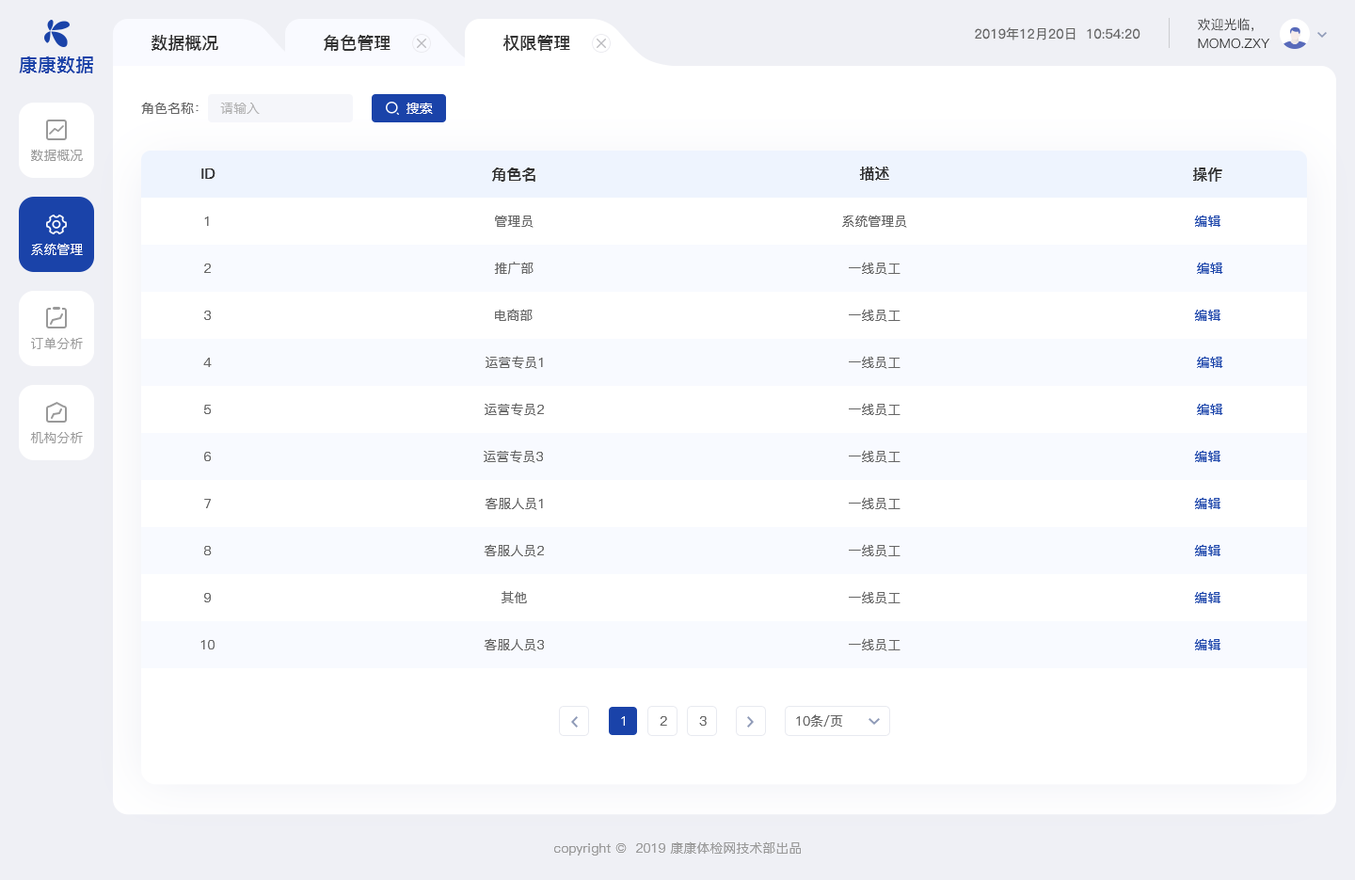
<style>
.page{position:relative;width:1355px;height:880px;background:#ffffff}
.page>*{position:absolute;margin:0}
.t1{font:13.2px "PingFang-SC-Medium";color:#333333;text-transform:uppercase}
.t2{font:13.2px "PingFang-SC-Regular";color:#666666}
.t3{font:16.9px "PingFang-SC-Bold";color:#333333;text-transform:uppercase}
.t4{font:18.8px "PingFangSC-Medium";color:#1a43a9;text-transform:uppercase}
.t5{font:13.2px "PingFang-SC-Medium";color:#666666}
.t6{font:13.2px "PingFang-SC-Medium";color:#b3b3b3}
.t7{font:13.2px "MicrosoftYaHei";letter-spacing:0.02em;color:#ffffff}
.t8{font:13.2px "PingFang-SC-Medium";color:#999999;text-transform:uppercase}
.t9{font:15.1px "PingFang-SC-Bold";color:#333333;text-transform:uppercase}
.t10{font:13.2px "PingFang-SC-Medium";color:#666666;text-transform:uppercase}
.t11{font:13.2px "PingFang-SC-Medium";color:#1a43a9;text-transform:uppercase}
.t12{font:13.2px "PingFang-SC-Medium";color:#ffffff;text-transform:uppercase}
.t13{font:13.2px "PingFang-SC-Medium";color:#999999}
</style>
<div class="page">
<p class="t1" style="left:1198px;top:18px;width:56px;height:14px">欢迎光临，</p>
<p class="t2" style="left:975px;top:27px;width:166px;height:13px">2019年12月20日  10:54:20</p>
<p class="t3" style="left:152px;top:35px;width:66px;height:16px">数据概况</p>
<p class="t3" style="left:324px;top:35px;width:67px;height:16px">角色管理</p>
<p class="t3" style="left:503px;top:35px;width:67px;height:16px">权限管理</p>
<p class="t1" style="left:1198px;top:38px;width:72px;height:11px">momo.zxy</p>
<p class="t4" style="left:19px;top:56px;width:74px;height:17px">康康数据</p>
<p class="t5" style="left:141px;top:102px;width:58px;height:12px">角色名称：</p>
<p class="t6" style="left:220px;top:103px;width:40px;height:11px">请输入</p>
<p class="t7" style="left:407px;top:103px;width:26px;height:11px">搜索</p>
<p class="t8" style="left:31px;top:150px;width:52px;height:11px">数据概况</p>
<p class="t9" style="left:201px;top:168px;width:15px;height:11px">ID</p>
<p class="t9" style="left:492px;top:168px;width:43px;height:14px">角色名</p>
<p class="t9" style="left:859px;top:167px;width:30px;height:14px">描述</p>
<p class="t9" style="left:1193px;top:168px;width:29px;height:14px">操作</p>
<p class="t10" style="left:204px;top:216px;width:5px;height:10px">1</p>
<p class="t10" style="left:495px;top:215px;width:39px;height:13px">管理员</p>
<p class="t10" style="left:842px;top:215px;width:65px;height:13px">系统管理员</p>
<p class="t11" style="left:1194px;top:215px;width:27px;height:12px">编辑</p>
<p class="t12" style="left:31px;top:243px;width:52px;height:12px">系统管理</p>
<p class="t10" style="left:204px;top:264px;width:7px;height:9px">2</p>
<p class="t10" style="left:494px;top:262px;width:40px;height:13px">推广部</p>
<p class="t10" style="left:849px;top:262px;width:52px;height:13px">一线员工</p>
<p class="t11" style="left:1197px;top:262px;width:26px;height:12px">编辑</p>
<p class="t10" style="left:204px;top:311px;width:7px;height:9px">3</p>
<p class="t10" style="left:495px;top:309px;width:38px;height:12px">电商部</p>
<p class="t10" style="left:849px;top:309px;width:52px;height:13px">一线员工</p>
<p class="t11" style="left:1194px;top:309px;width:27px;height:12px">编辑</p>
<p class="t8" style="left:31px;top:337px;width:52px;height:12px">订单分析</p>
<p class="t10" style="left:203px;top:358px;width:9px;height:9px">4</p>
<p class="t10" style="left:486px;top:356px;width:57px;height:13px">运营专员1</p>
<p class="t10" style="left:849px;top:356px;width:52px;height:13px">一线员工</p>
<p class="t11" style="left:1197px;top:356px;width:26px;height:12px">编辑</p>
<p class="t10" style="left:204px;top:405px;width:7px;height:9px">5</p>
<p class="t10" style="left:485px;top:403px;width:59px;height:13px">运营专员2</p>
<p class="t10" style="left:849px;top:403px;width:52px;height:13px">一线员工</p>
<p class="t11" style="left:1197px;top:403px;width:26px;height:12px">编辑</p>
<p class="t8" style="left:30px;top:432px;width:53px;height:11px">机构分析</p>
<p class="t10" style="left:484px;top:450px;width:59px;height:13px">运营专员3</p>
<p class="t10" style="left:849px;top:450px;width:52px;height:13px">一线员工</p>
<p class="t11" style="left:1194px;top:450px;width:27px;height:12px">编辑</p>
<p class="t10" style="left:204px;top:452px;width:7px;height:9px">6</p>
<p class="t10" style="left:485px;top:497px;width:58px;height:13px">客服人员1</p>
<p class="t10" style="left:849px;top:497px;width:52px;height:13px">一线员工</p>
<p class="t11" style="left:1194px;top:497px;width:27px;height:12px">编辑</p>
<p class="t10" style="left:204px;top:499px;width:7px;height:9px">7</p>
<p class="t10" style="left:204px;top:546px;width:8px;height:9px">8</p>
<p class="t10" style="left:484px;top:544px;width:60px;height:13px">客服人员2</p>
<p class="t10" style="left:849px;top:544px;width:52px;height:13px">一线员工</p>
<p class="t11" style="left:1194px;top:544px;width:27px;height:12px">编辑</p>
<p class="t10" style="left:204px;top:593px;width:7px;height:9px">9</p>
<p class="t10" style="left:502px;top:591px;width:25px;height:12px">其他</p>
<p class="t10" style="left:849px;top:591px;width:52px;height:13px">一线员工</p>
<p class="t11" style="left:1194px;top:591px;width:27px;height:12px">编辑</p>
<p class="t10" style="left:200px;top:640px;width:15px;height:9px">10</p>
<p class="t10" style="left:484px;top:638px;width:60px;height:13px">客服人员3</p>
<p class="t10" style="left:849px;top:638px;width:52px;height:13px">一线员工</p>
<p class="t11" style="left:1194px;top:638px;width:27px;height:12px">编辑</p>
<p class="t12" style="left:621px;top:716px;width:4px;height:10px">1</p>
<p class="t10" style="left:660px;top:716px;width:7px;height:10px">2</p>
<p class="t10" style="left:699px;top:716px;width:8px;height:10px">3</p>
<p class="t10" style="left:796px;top:714px;width:47px;height:13px">10条/页</p>
<p class="t13" style="left:554px;top:841px;width:247px;height:14px">copyright ©  2019 康康体检网技术部出品</p>
</div>
